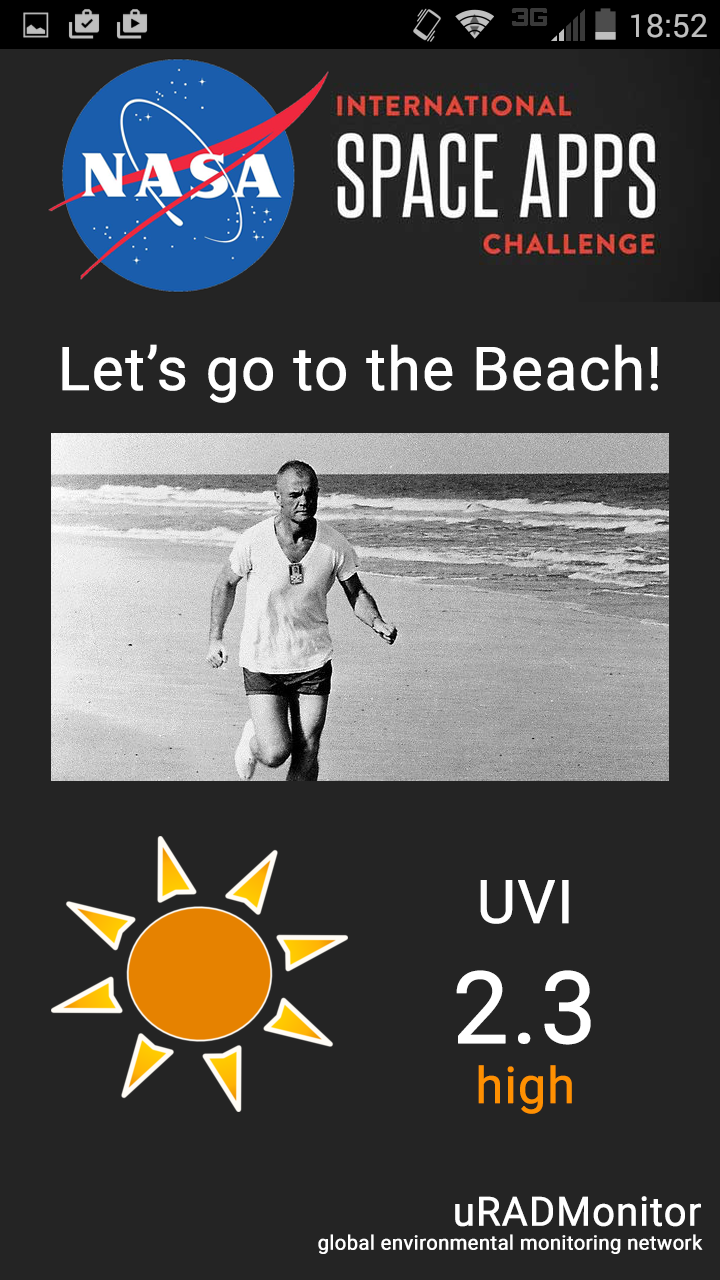
<style>
.page{position:relative;width:720px;height:1280px;background:#242424}
.page>*{position:absolute;margin:0}
.t1{font:60px "Roboto-Regular";color:#ffffff;font-weight:bold}
.t2{font:50px "Roboto-Regular";color:#ff9001;font-weight:bold}
.t3{font:100px "Roboto-Regular";color:#ffffff;font-weight:bold}
.t4{font:20px "Roboto-Regular";color:#ffffff;font-weight:bold}
.t5{font:40px "Roboto-Regular";color:#ffffff;font-weight:bold}
</style>
<div class="page">
<p class="t1" style="left:62px;top:344px;width:596px;height:59px">Let’s go to the Beach!</p>
<p class="t2" style="left:456px;top:880px;width:135px;height:234px;text-align:center"><span class="t1">UVI<br></span><span class="t3">2.3<br></span>high</p>
<p class="t4" style="left:318px;top:1196px;width:385px;height:58px;text-align:right"><span class="t5">uRADMonitor<br></span>global environmental monitoring network</p>
</div>
